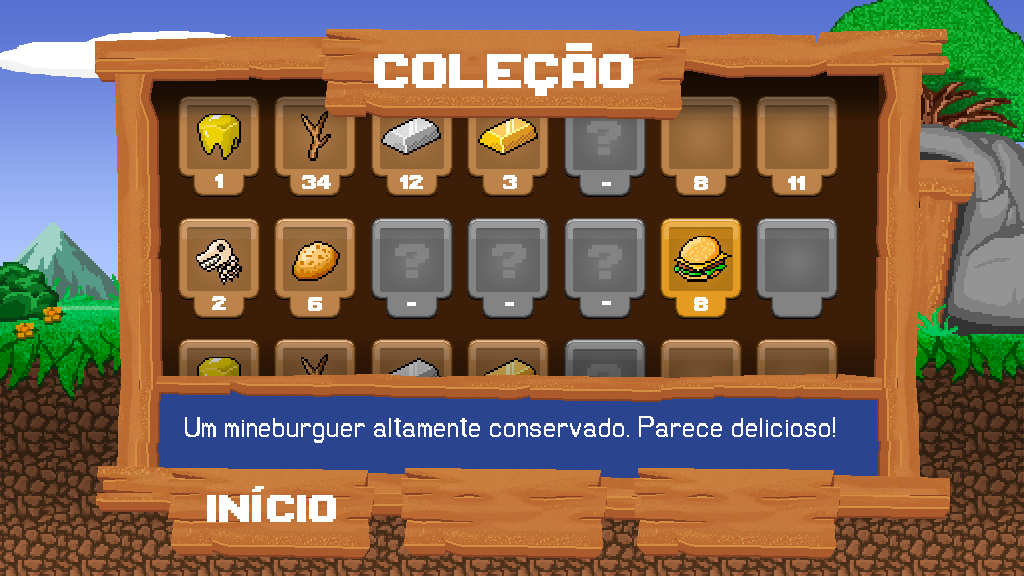
<style>
.page{position:relative;width:1024px;height:576px}
.page>*{position:absolute;margin:0}
.t1{font:60px "MQPix";color:#ffffff}
.t2{font:36px "UGPixel";color:#ffffff}
.t3{font:48px "MQPix";color:#ffffff}
</style>
<div class="page">
<p class="t1" style="left:374px;top:43px;width:259px;height:53px">coleção</p>
<p class="t2" style="left:185px;top:416px;width:650px;height:27px">Um mineburguer altamente conservado. Parece delicioso!</p>
<p class="t3" style="left:207px;top:486px;width:129px;height:36px">início</p>
</div>
